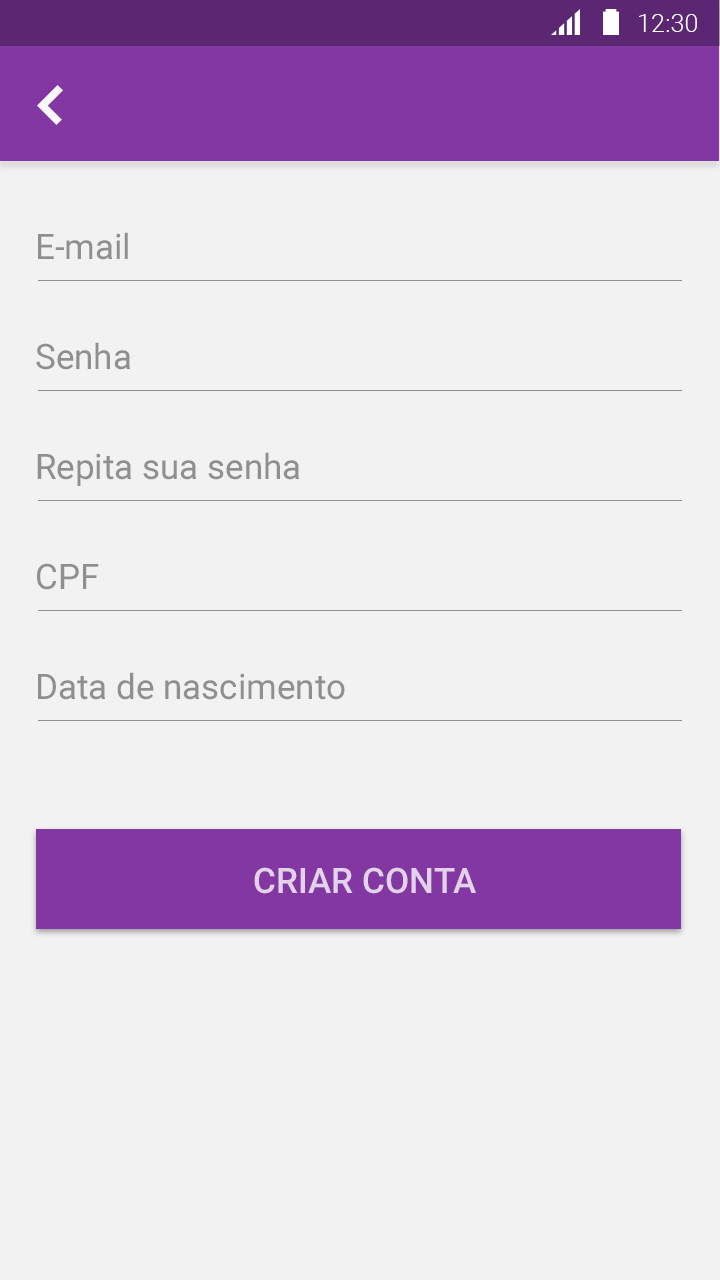
<style>
.page{position:relative;width:720px;height:1280px;background:#f2f2f2}
.page>*{position:absolute;margin:0}
.t1{font:25.4px "Roboto-Light";color:#ffffff}
.t2{font:35px "Roboto-Regular";color:#8f8f8f}
.t3{font:35px "Roboto-Medium";color:#e3d2e9}
</style>
<div class="page">
<p class="t1" style="left:639px;top:14px;width:58px;height:18px">12:30</p>
<p class="t2" style="left:38px;top:232px;width:90px;height:28px">E-mail</p>
<p class="t2" style="left:36px;top:342px;width:94px;height:28px">Senha</p>
<p class="t2" style="left:37px;top:452px;width:262px;height:34px">Repita sua senha</p>
<p class="t2" style="left:37px;top:563px;width:62px;height:27px">CPF</p>
<p class="t2" style="left:38px;top:672px;width:307px;height:28px">Data de nascimento</p>
<p class="t3" style="left:254px;top:867px;width:222px;height:27px">CRIAR CONTA</p>
</div>
